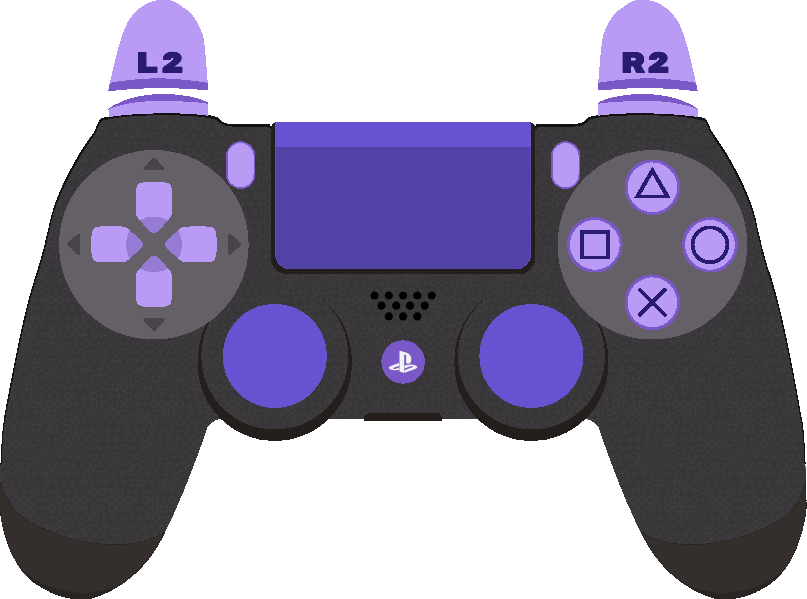
<style>
.page{position:relative;width:807px;height:599px;background:#ffffff}
.page>*{position:absolute;margin:0}
.t1{font:30px "RubikMonoOne-Regular";color:#291b72}
</style>
<div class="page">
<p class="t1" style="left:138px;top:51px;width:45px;height:22px">L2</p>
<p class="t1" style="left:622px;top:51px;width:47px;height:22px">R2</p>
</div>
